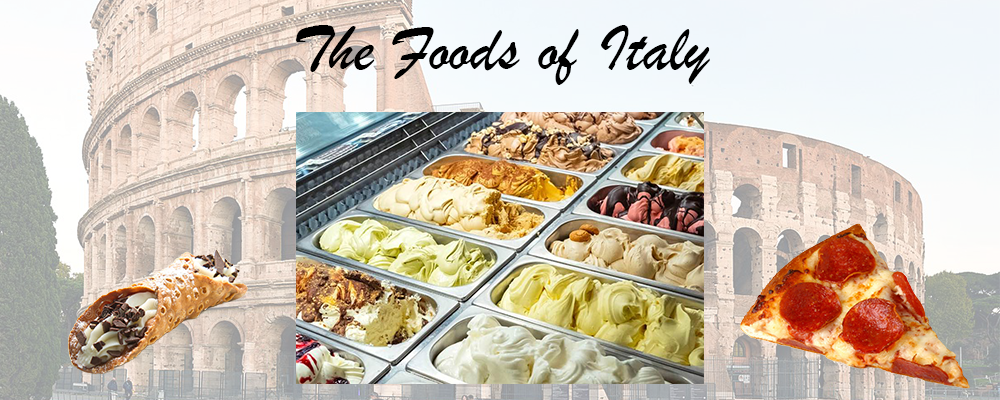
<style>
.page{position:relative;width:1000px;height:400px}
.page>*{position:absolute;margin:0}
.t1{font:66.7px "BrushScriptMT";color:#000000}
</style>
<div class="page">
<p class="t1" style="left:296px;top:25px;width:414px;height:60px">The Foods of Italy</p>
</div>
